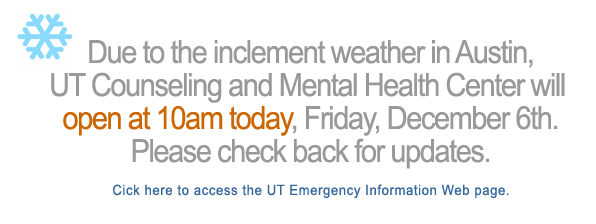
<style>
.page{position:relative;width:596px;height:224px;background:#ffffff}
.page>*{position:absolute;margin:0}
.t1{font:31.9px/33px "ArialMT";letter-spacing:-0.05em;color:#999999;scale:0.91 1}
.t2{font:31.9px/33px "ArialMT";letter-spacing:-0.05em;color:#cc6600;scale:0.91 1}
.t3{font:14.3px/33px "ArialMT";letter-spacing:0.05em;color:#336699;scale:0.91 1}
</style>
<div class="page">
<p class="t1" style="left:51px;top:40px;width:514px;height:159px;text-align:center">Due to the inclement weather in Austin,<br>UT Counseling and Mental Health Center will <br><span class="t2">open at 10am today</span>, Friday, December 6th.<br>Please check back for updates.<br><span class="t3">Cick here to access the UT Emergency Information Web page.</span></p>
</div>
